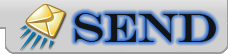
<style>
.page{position:relative;width:228px;height:54px;background:#d0d0d0}
.page>*{position:absolute;margin:0}
.t1{font:40.9px "EngraversMT";color:#121518}
</style>
<div class="page">
<p class="t1" style="left:74px;top:13px;width:142px;height:29px">SEND</p>
</div>
